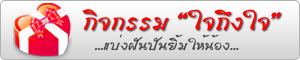
<style>
.page{position:relative;width:300px;height:60px}
.page>*{position:absolute;margin:0}
.t1{font:32px "DSNRibbon";color:#ff0000}
.t2{font:18.7px "DSNRibbon";color:#464646}
</style>
<div class="page">
<p class="t1" style="left:82px;top:9px;width:199px;height:22px">กิจกรรม “ใจถึงใจ”</p>
<p class="t2" style="left:94px;top:34px;width:145px;height:17px">...แบ่งฝันปันยิ้มให้น้อง...</p>
</div>
